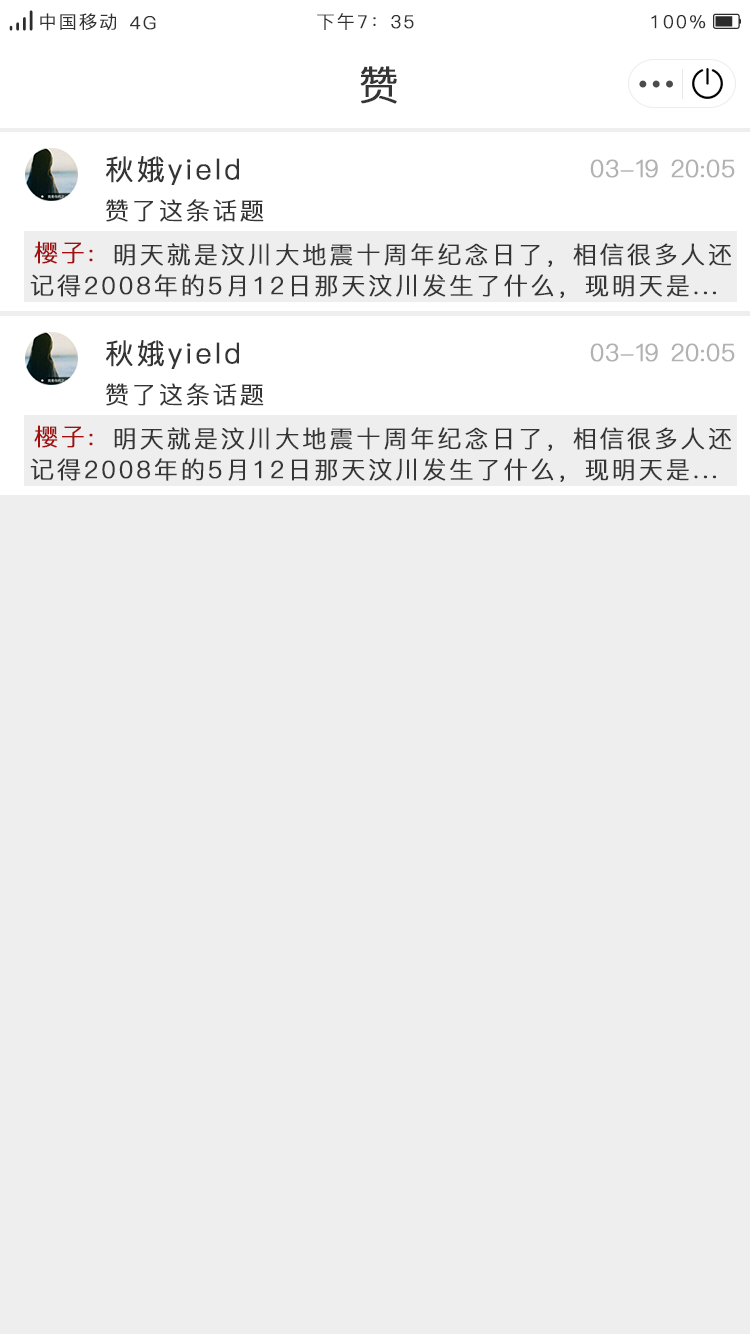
<style>
.page{position:relative;width:750px;height:1334px;background:#eeeeee}
.page>*{position:absolute;margin:0}
.t1{font:18px "PingFang-SC-Regular";letter-spacing:0.1em;color:#323232;font-weight:bold}
.t2{font:40px "PingFang-SC-Regular";letter-spacing:0.1em;color:#353535;font-weight:bold}
.t3{font:28px "PingFang-SC-Regular";letter-spacing:0.1em;color:#353535;font-weight:bold}
.t4{font:24px "PingFang-SC-Regular";letter-spacing:0.1em;color:#b2b2b2;font-weight:bold}
.t5{font:24px "PingFang-SC-Regular";letter-spacing:0.1em;color:#353535;font-weight:bold}
.t6{font:24px "PingFang-SC-Regular";letter-spacing:0.1em;color:#a10f0f;font-weight:bold}
</style>
<div class="page">
<p class="t1" style="left:40px;top:13px;width:76px;height:18px">中国移动</p>
<p class="t1" style="left:130px;top:16px;width:26px;height:14px">4G</p>
<p class="t1" style="left:317px;top:13px;width:97px;height:17px">下午7：35</p>
<p class="t1" style="left:651px;top:15px;width:55px;height:14px">100%</p>
<p class="t2" style="left:360px;top:66px;width:37px;height:38px">赞</p>
<p class="t3" style="left:106px;top:156px;width:133px;height:29px">秋娥yield</p>
<p class="t4" style="left:590px;top:159px;width:145px;height:19px">03-19 20:05</p>
<p class="t5" style="left:106px;top:199px;width:158px;height:23px">赞了这条话题</p>
<p class="t6" style="left:34px;top:241px;width:59px;height:23px">樱子:</p>
<p class="t5" style="left:114px;top:243px;width:617px;height:24px">明天就是汶川大地震十周年纪念日了，相信很多人还</p>
<p class="t5" style="left:30px;top:274px;width:686px;height:24px">记得2008年的5月12日那天汶川发生了什么，现明天是...</p>
<p class="t3" style="left:106px;top:340px;width:133px;height:29px">秋娥yield</p>
<p class="t4" style="left:590px;top:343px;width:145px;height:19px">03-19 20:05</p>
<p class="t5" style="left:106px;top:383px;width:158px;height:23px">赞了这条话题</p>
<p class="t6" style="left:34px;top:425px;width:59px;height:23px">樱子:</p>
<p class="t5" style="left:114px;top:427px;width:617px;height:24px">明天就是汶川大地震十周年纪念日了，相信很多人还</p>
<p class="t5" style="left:30px;top:458px;width:686px;height:24px">记得2008年的5月12日那天汶川发生了什么，现明天是...</p>
</div>
